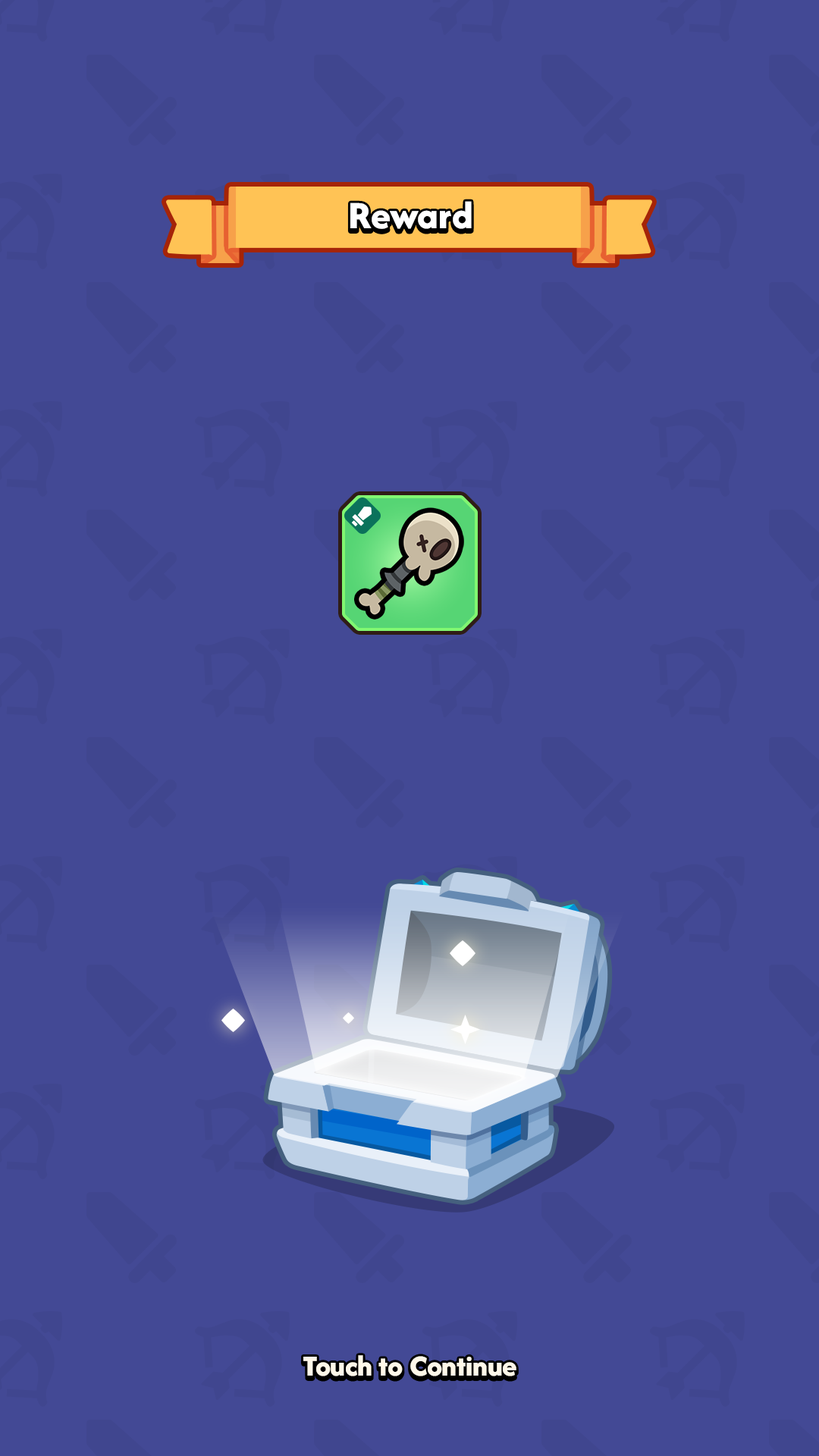
<style>
.page{position:relative;width:819px;height:1456px;background:#434995}
.page>*{position:absolute;margin:0}
.t1{font:40.2px "AfacadFlux-ExtraBold";color:#ffffff}
.t2{font:30.3px "AfacadFlux-ExtraBold";color:#fff8e9}
</style>
<div class="page">
<p class="t1" style="left:350px;top:201px;width:122px;height:28px">Reward</p>
<p class="t2" style="left:303px;top:1355px;width:213px;height:21px">Touch to Continue</p>
</div>
